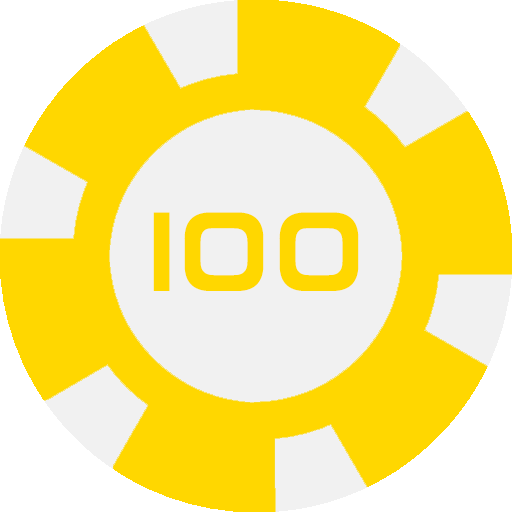
<style>
.page{position:relative;width:512px;height:512px;background:#ffd700}
.page>*{position:absolute;margin:0}
.t1{font:107.3px "ElementalEnd";color:#ffd700}
</style>
<div class="page">
<p class="t1" style="left:153px;top:212px;width:206px;height:79px">100</p>
</div>
